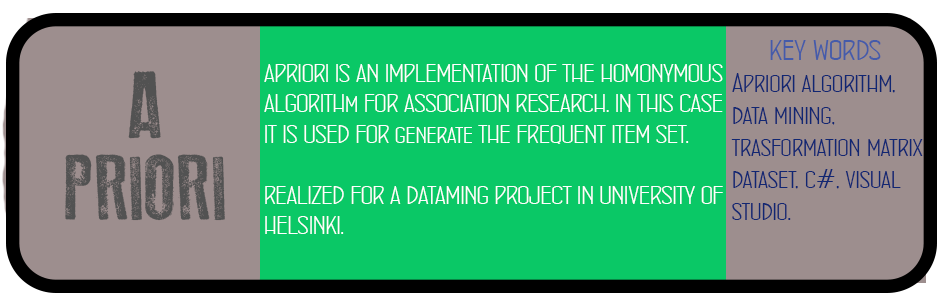
<style>
.page{position:relative;width:945px;height:302px;background:#0ac866}
.page>*{position:absolute;margin:0}
.t1{font:26.7px "ConcursoItalianBTNWide";color:#112672}
.t2{font:32px "ConcursoItalianBTNWide";color:#455baa}
.t3{font:25.3px "ConcursoItalianBTNWide";color:#ffffff}
.t4{font:93.3px "OldPress";color:#525252}
.t5{font:80px "ConcursoItalianBTNWide";color:#525252}
</style>
<div class="page">
<p class="t1" style="left:731px;top:40px;width:192px;height:180px"><span class="t2">     key words<br></span>Apriori algorithm,<br>data mining, <br>trasformation matrix<br>dataset, c#, visual <br>studio.</p>
<p class="t3" style="left:264px;top:64px;width:459px;height:170px">APRIORI IS AN IMPLEMENTATION OF THE HOMONYMOUS<br>ALGORITHm FOR ASSOCIATION RESEARCH. IN THIS CASE<br>IT IS USED FOR generate THE FREQUENT ITEM SET.<br><br>REALIZED FOR A DATAMING PROJECT IN UNIVERSITY OF<br>HELSINKI.</p>
<p class="t4" style="left:128px;top:71px;width:33px;height:68px"><span class="t5"> </span>A</p>
<p class="t4" style="left:65px;top:154px;width:160px;height:67px">PRIORI</p>
</div>
